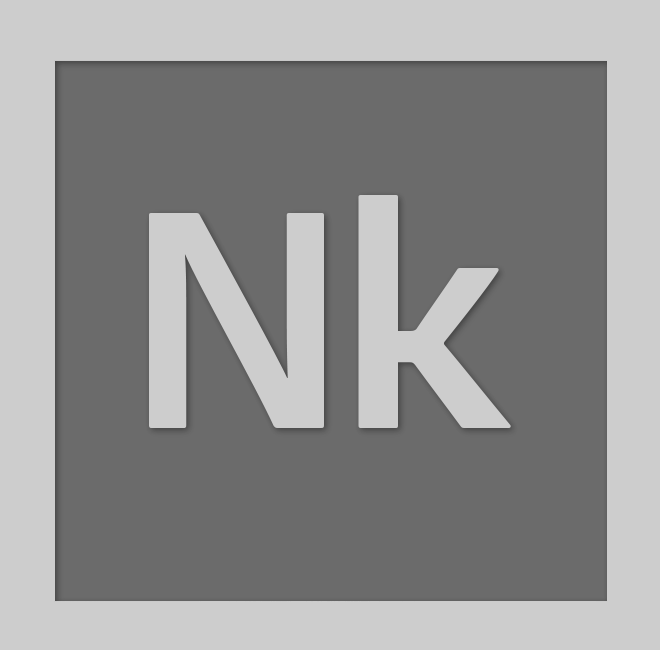
<style>
.page{position:relative;width:660px;height:650px;background:#6b6b6b}
.page>*{position:absolute;margin:0}
.t1{font:329.2px "AdobeClean-Bold";letter-spacing:-0.04em;color:#cdcdcd}
</style>
<div class="page">
<p class="t1" style="left:149px;top:195px;width:362px;height:233px">Nk</p>
</div>
